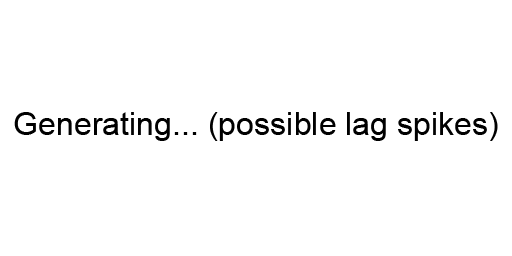
<style>
.page{position:relative;width:512px;height:256px;background:#ffffff}
.page>*{position:absolute;margin:0}
.t1{font:32.1px "ArialMT";color:#000000}
</style>
<div class="page">
<p class="t1" style="left:14px;top:112px;width:484px;height:29px">Generating... (possible lag spikes)</p>
</div>
